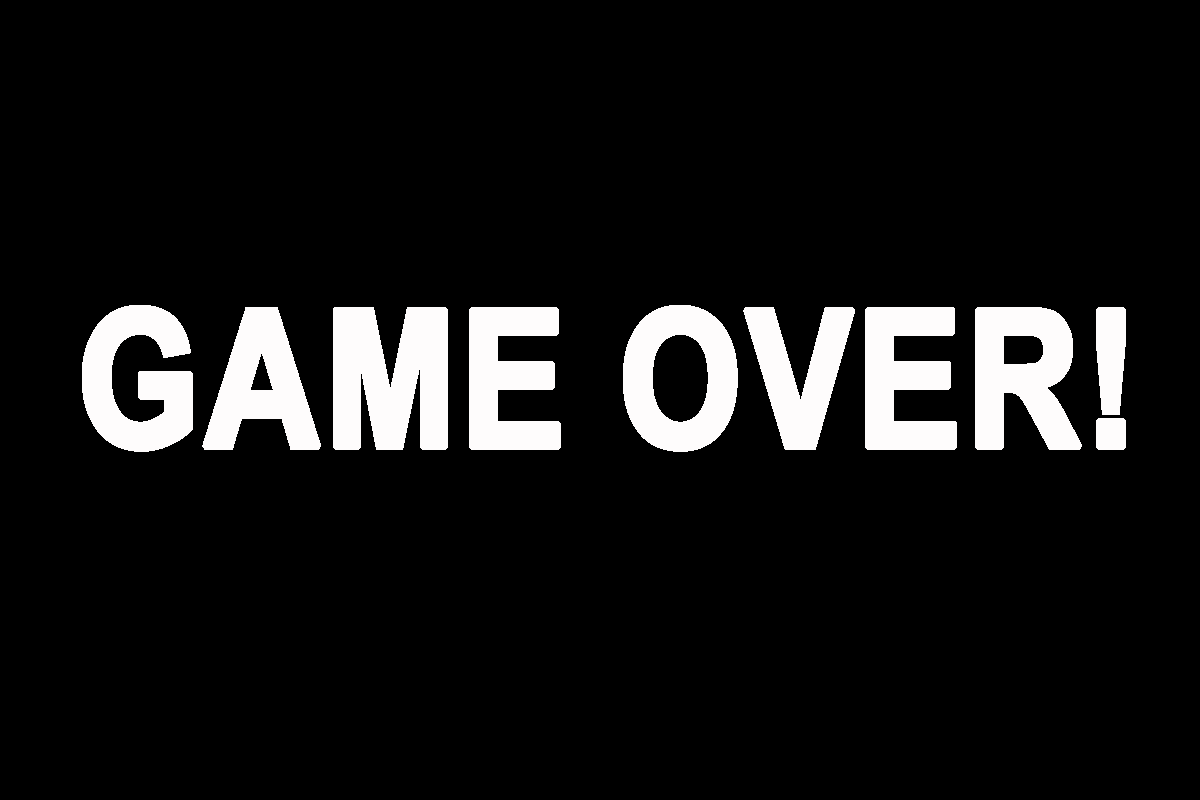
<style>
.page{position:relative;width:1200px;height:800px;background:#000000}
.page>*{position:absolute;margin:0}
.t1{font:191.7px "ArialNarrow-Bold";color:#fefcfc;font-weight:bold}
</style>
<div class="page">
<p class="t1" style="left:82px;top:305px;width:1044px;height:147px">GAME OVER!</p>
</div>
